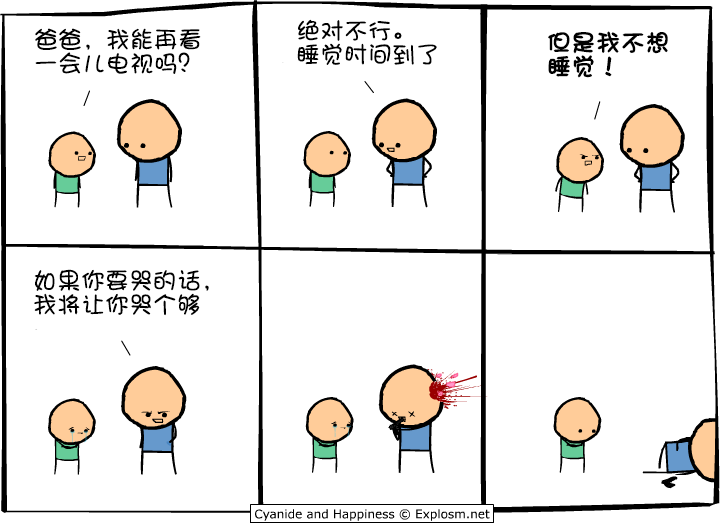
<style>
.page{position:relative;width:720px;height:525px;background:#ffffff}
.page>*{position:absolute;margin:0}
.t1{font:24px/24px "DFShaoNvW5";color:#000000}
.t2{font:24px/24px "DFShaoNvW5";color:#000000;font-weight:bold}
</style>
<div class="page">
<p class="t1" style="left:35px;top:28px;width:166px;height:46px">爸爸，我能再看<br>一会儿电视吗？</p>
<p class="t1" style="left:297px;top:19px;width:140px;height:46px">绝对不行。<br>睡觉时间到了</p>
<p class="t2" style="left:548px;top:31px;width:120px;height:47px">但是我不想<br>睡觉！</p>
<p class="t1" style="left:34px;top:269px;width:175px;height:47px">如果你要哭的话，<br>我将让你哭个够</p>
</div>
